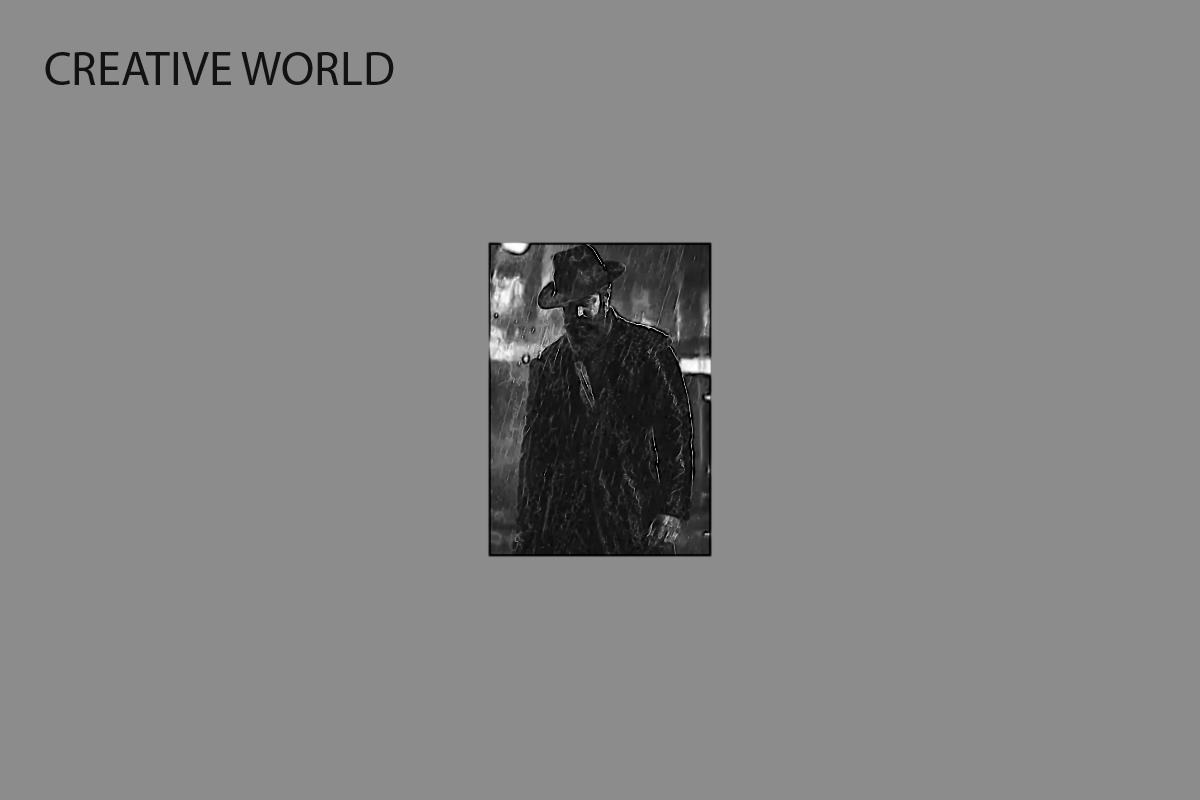
<style>
.page{position:relative;width:1200px;height:800px;background:#8c8c8c}
.page>*{position:absolute;margin:0}
.t1{font:48px "MyriadPro-Regular";color:#121212}
</style>
<div class="page">
<p class="t1" style="left:45px;top:52px;width:349px;height:33px">CREATIVE WORLD</p>
</div>
